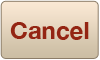
<style>
.page{position:relative;width:100px;height:60px}
.page>*{position:absolute;margin:0}
.t1{font:24px "HelveticaNeue-Bold";color:#942513}
</style>
<div class="page">
<p class="t1" style="left:10px;top:22px;width:79px;height:18px">Cancel</p>
</div>
